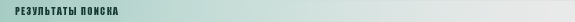
<style>
.page{position:relative;width:575px;height:22px}
.page>*{position:absolute;margin:0}
.t1{font:10px "Impact";letter-spacing:0.1em;color:#183b31}
</style>
<div class="page">
<p class="t1" style="left:15px;top:7px;width:103px;height:8px">РЕЗУЛЬТАТЫ ПОИСКА</p>
</div>
